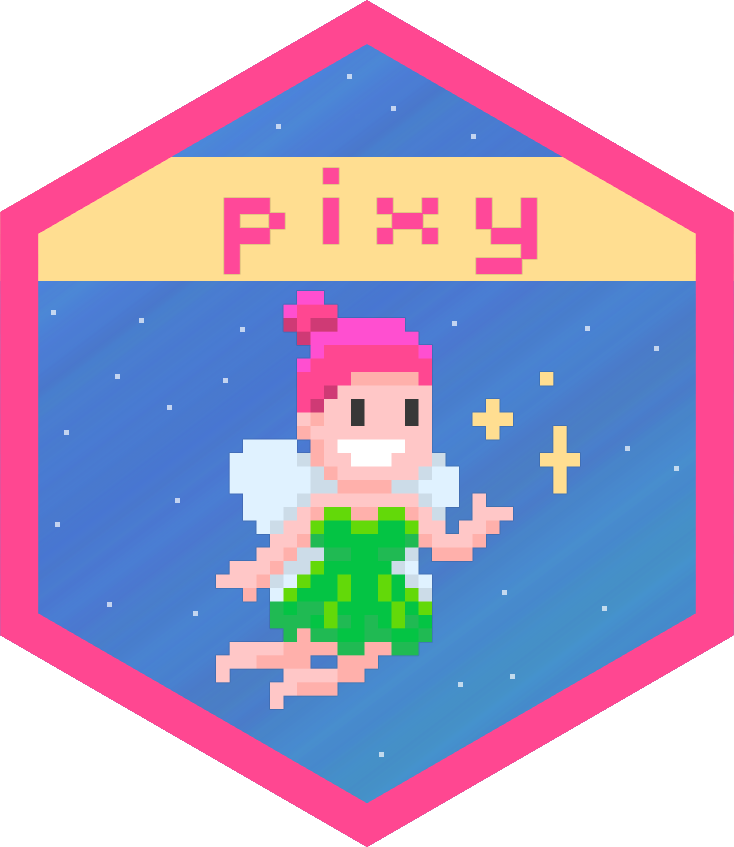
<style>
.page{position:relative;width:734px;height:847px;background:#ffffff}
.page>*{position:absolute;margin:0}
.t1{font:100px "Pixel";letter-spacing:0.2em;color:#ff4899}
</style>
<div class="page">
<p class="t1" style="left:224px;top:168px;width:313px;height:106px">pixy</p>
</div>
